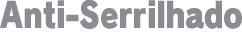
<style>
.page{position:relative;width:242px;height:36px;background:#ffffff}
.page>*{position:absolute;margin:0}
.t1{font:35.4px "RodinPro-UB";letter-spacing:-0.02em;color:#8b8c92;scale:0.83 1}
</style>
<div class="page">
<p class="t1" style="left:0px;top:0px;width:242px;height:29px">Anti-Serrilhado</p>
</div>
